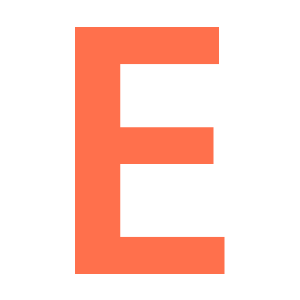
<style>
.page{position:relative;width:300px;height:300px;background:#ffffff}
.page>*{position:absolute;margin:0}
.t1{font:367.1px "MyriadPro-Semibold";color:#ff704c}
</style>
<div class="page">
<p class="t1" style="left:75px;top:27px;width:150px;height:247px">E</p>
</div>
